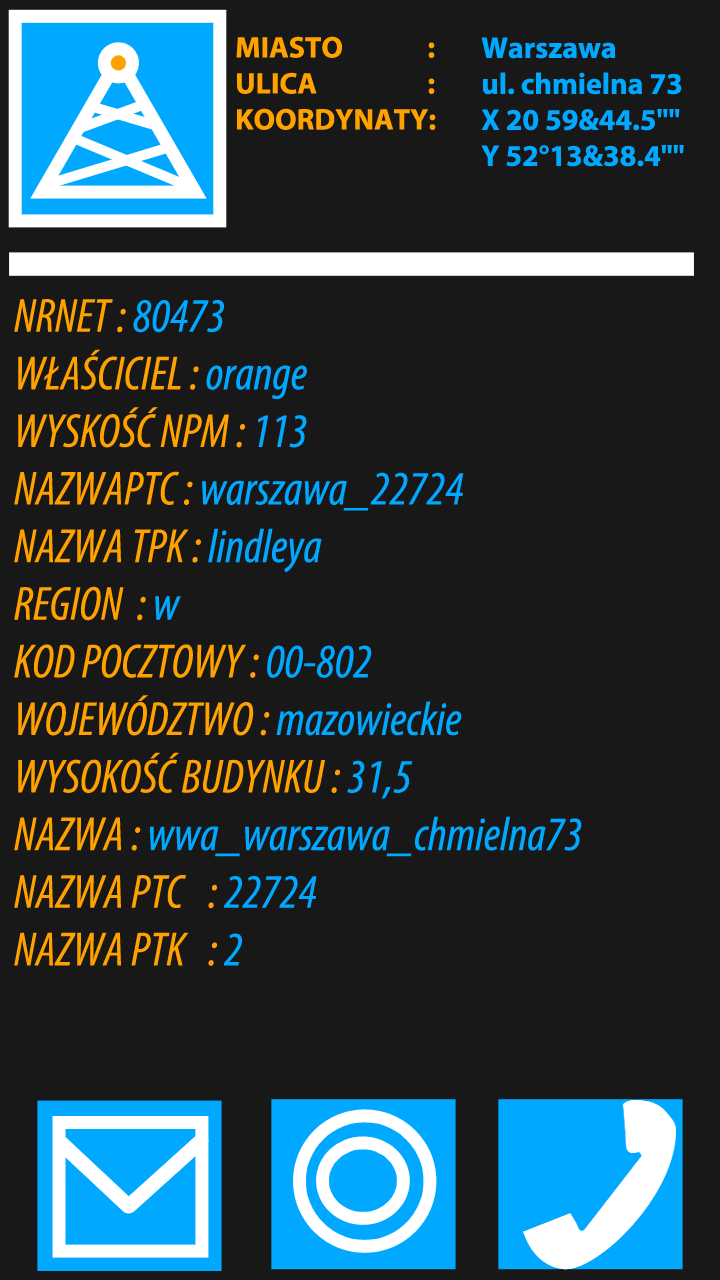
<style>
.page{position:relative;width:720px;height:1280px;background:#181818}
.page>*{position:absolute;margin:0}
.t1{font:30px "MyriadPro-Bold";color:#ffa200}
.t2{font:30px "MyriadPro-Bold";color:#00a8ff}
.t3{font:48px "MyriadPro-CondIt";color:#00a8ff}
.t4{font:48px "MyriadPro-CondIt";color:#ffa200}
</style>
<div class="page">
<p class="t1" style="left:236px;top:36px;width:200px;height:94px">MIASTO      :<br>ULICA      :<br>KOORDYNATY:</p>
<p class="t2" style="left:481px;top:37px;width:203px;height:130px">Warszawa<br>ul. chmielna 73<br>X 20 59&amp;44.5""<br>Y 52°13&amp;38.4""</p>
<p class="t3" style="left:14px;top:299px;width:568px;height:667px"><span class="t4">NRNET : </span>80473<br><span class="t4">WŁAŚCICIEL : </span>orange<br><span class="t4">WYSKOŚĆ NPM : </span>113<br><span class="t4">NAZWAPTC : </span>warszawa_22724<br><span class="t4">NAZWA TPK : </span>lindleya<br><span class="t4">REGION  : </span>w<span class="t4"> <br>KOD POCZTOWY : </span>00-802<br><span class="t4">WOJEWÓDZTWO : </span>mazowieckie<br><span class="t4">WYSOKOŚĆ BUDYNKU : </span>31,5<br><span class="t4">NAZWA : </span>wwa_warszawa_chmielna73<br><span class="t4">NAZWA PTC   : </span>22724<br><span class="t4">NAZWA PTK   : </span>2</p>
</div>
